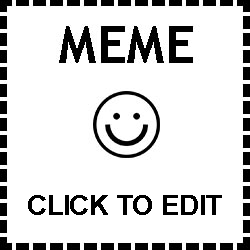
<style>
.page{position:relative;width:250px;height:250px;background:#ffffff}
.page>*{position:absolute;margin:0}
.t1{font:27.5px "Arial-BoldMT";color:#000000}
</style>
<div class="page">
<p class="t1" style="left:28px;top:195px;width:194px;height:20px">CLICK TO EDIT</p>
</div>
